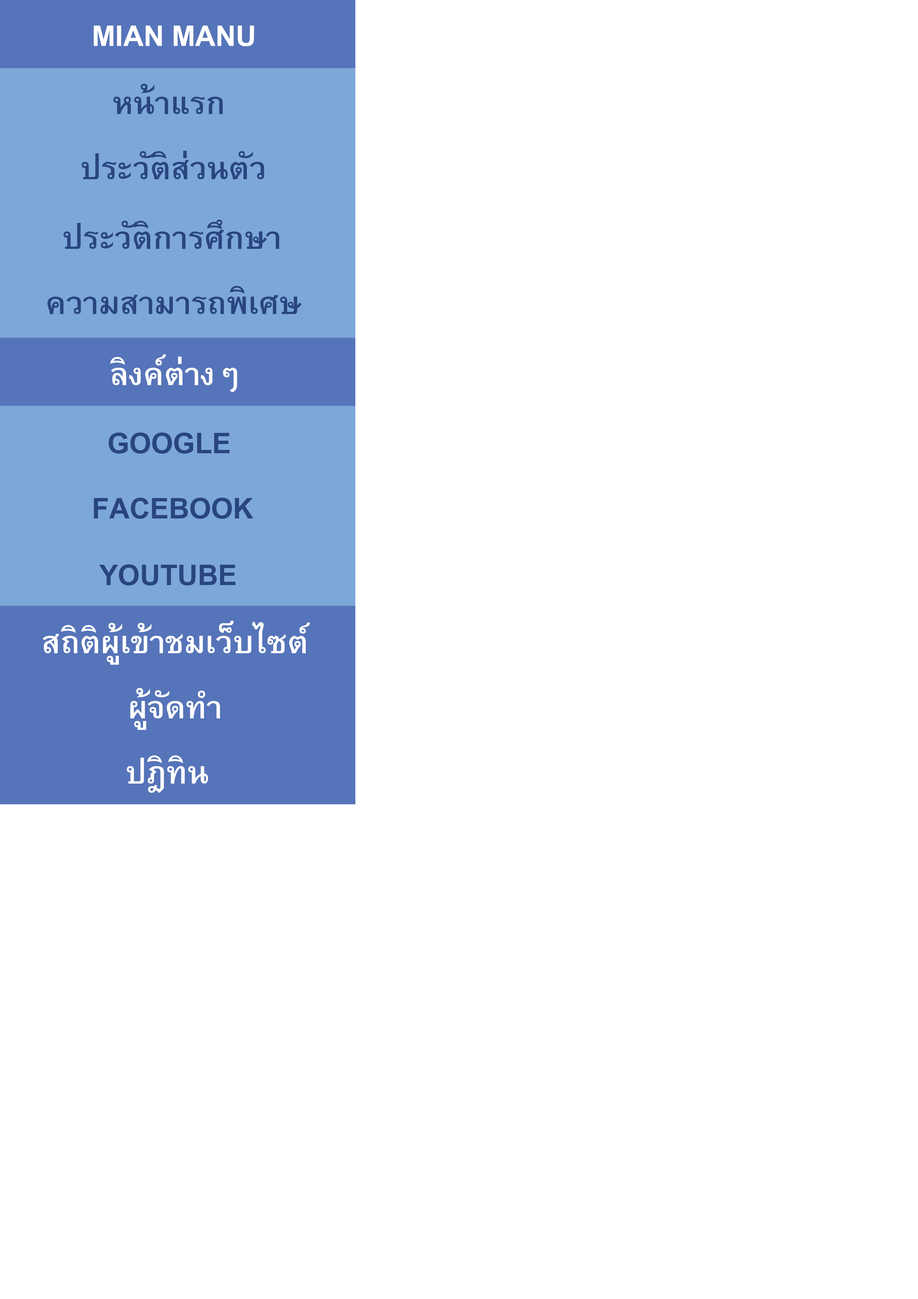
<style>
.page{position:relative;width:918px;height:1299px;background:#ffffff}
.page>*{position:absolute;margin:0}
.t1{font:43.2px "BrowalliaUPC-Bold";color:#ffffff}
.t2{font:43.2px "BrowalliaUPC-Bold";color:#29457e}
</style>
<div class="page">
<p class="t1" style="left:94px;top:26px;width:160px;height:20px">MIAN MANU</p>
<p class="t2" style="left:113px;top:84px;width:110px;height:30px">หน้าแรก</p>
<p class="t2" style="left:81px;top:151px;width:183px;height:28px">ประวัติส่วนตัว</p>
<p class="t2" style="left:63px;top:220px;width:217px;height:29px">ประวัติการศึกษา</p>
<p class="t2" style="left:47px;top:286px;width:255px;height:28px">ความสามารถพิเศษ</p>
<p class="t1" style="left:110px;top:354px;width:127px;height:38px">ลิงค์ต่างๆ</p>
<p class="t2" style="left:108px;top:432px;width:122px;height:22px">GOOGLE</p>
<p class="t2" style="left:94px;top:498px;width:159px;height:21px">FACEBOOK</p>
<p class="t2" style="left:99px;top:564px;width:137px;height:21px">YOUTUBE</p>
<p class="t1" style="left:43px;top:620px;width:267px;height:45px">สถิติผู้เข้าชมเว็บไซต์</p>
<p class="t1" style="left:130px;top:688px;width:90px;height:42px">ผู้จัดทำ</p>
<p class="t1" style="left:127px;top:755px;width:81px;height:38px">ปฎิทิน</p>
</div>
